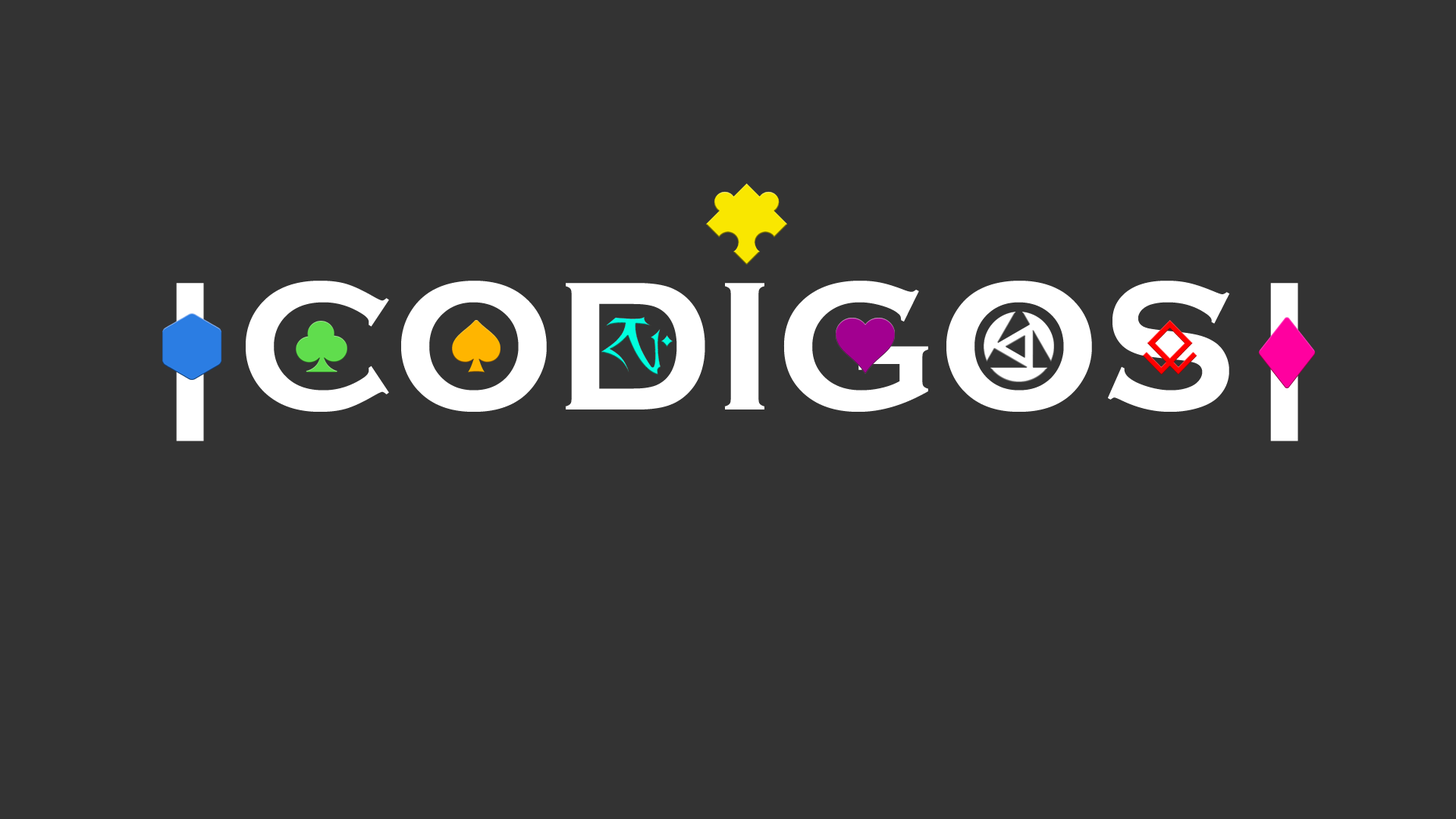
<style>
.page{position:relative;width:1456px;height:819px;background:#333333}
.page>*{position:absolute;margin:0}
.t1{font:189.6px "CopperplateGothic-Bold";color:#ffffff}
</style>
<div class="page">
<p class="t1" style="left:176px;top:281px;width:1122px;height:160px">|CODIGOS|</p>
</div>
